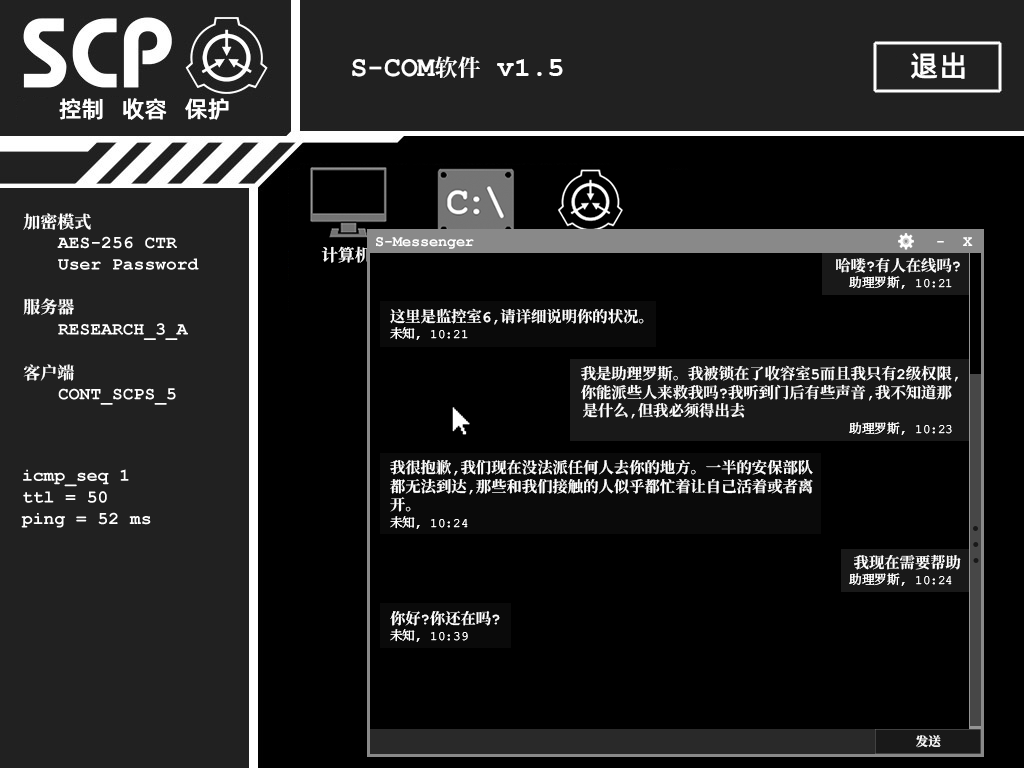
<style>
.page{position:relative;width:1024px;height:768px;background:#000000}
.page>*{position:absolute;margin:0}
.t1{font:29px "AlibabaPuHuiTiM";color:#ffffff}
.t2{font:28px "ContainmentBreach-Bold";color:#ffffff}
.t3{font:23px "ContainmentBreach-Bold";color:#ffffff}
.t4{font:28px "CourierNewPS-BoldMT";color:#ffffff}
.t5{font:23px "AlibabaPuHuiTiM";color:#ffffff}
.t6{font:17px/22px "ContainmentBreach-Bold";color:#ffffff}
.t7{font:17px/17px "ContainmentBreach-Bold";color:#ffffff}
.t8{font:16.7px "ContainmentBreach-Bold";color:#ffffff}
.t9{font:12.7px/18.7px "ContainmentBreach-Regular";color:#ffffff}
.t10{font:15.3px/18.7px "ContainmentBreach-Bold";color:#ffffff}
.t11{font:12.7px "ContainmentBreach-Bold";color:#ffffff}
</style>
<div class="page">
<p class="t1" style="left:911px;top:52px;width:54px;height:27px">退出</p>
<p class="t2" style="left:352px;top:56px;width:211px;height:22px">S-COM<span class="t3">软件 </span><span class="t4">v1.5</span></p>
<p class="t5" style="left:59px;top:98px;width:170px;height:22px">控制   收容   保护</p>
<p class="t6" style="left:23px;top:213px;width:68px;height:168px"><span class="t7">加密模式<br><br><br><br><br></span>服务器<br> <br><br>客户端</p>
<p class="t8" style="left:321px;top:246px;width:50px;height:17px">计算机</p>
<p class="t9" style="left:836px;top:257px;width:124px;height:32px;text-align:right"><span class="t10">哈喽?有人在线吗?<br></span>助理罗斯， 10:21</p>
<p class="t10" style="left:390px;top:308px;width:254px;height:32px">这里是监控室6,请详细说明你的状况。<br><span class="t9">未知， 10:21</span></p>
<p class="t10" style="left:581px;top:365px;width:377px;height:70px;text-align:right">我是助理罗斯。我被锁在了收容室5而且我只有2级权限,<br>你能派些人来救我吗?我听到门后有些声音,我不知道那 <br>是什么,但我必须得出去        <br><span class="t9">助理罗斯， 10:23</span></p>
<p class="t10" style="left:390px;top:459px;width:423px;height:70px">我很抱歉,我们现在没法派任何人去你的地方。一半的安保部队<br>都无法到达,那些和我们接触的人似乎都忙着让自己活着或者离<br>开。<br><span class="t9">未知， 10:24</span></p>
<p class="t9" style="left:849px;top:554px;width:112px;height:32px;text-align:right"><span class="t10">我现在需要帮助<br></span>助理罗斯， 10:24</p>
<p class="t9" style="left:390px;top:611px;width:110px;height:31px"><span class="t10">你好?你还在吗?<br></span>未知， 10:39</p>
<p class="t11" style="left:916px;top:735px;width:25px;height:13px">发送</p>
</div>
